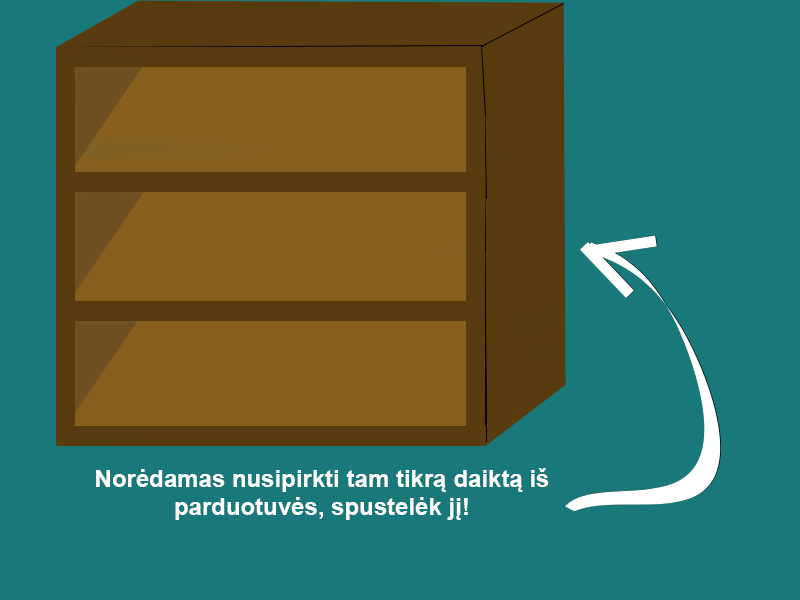
<style>
.page{position:relative;width:800px;height:600px;background:#197879}
.page>*{position:absolute;margin:0}
.t1{font:24px "Arial-BoldMT";color:#ffffff}
</style>
<div class="page">
<p class="t1" style="left:96px;top:468px;width:453px;height:52px;text-align:center">Norėdamas nusipirkti tam tikrą daiktą iš parduotuvės, spustelėk jį!</p>
</div>
